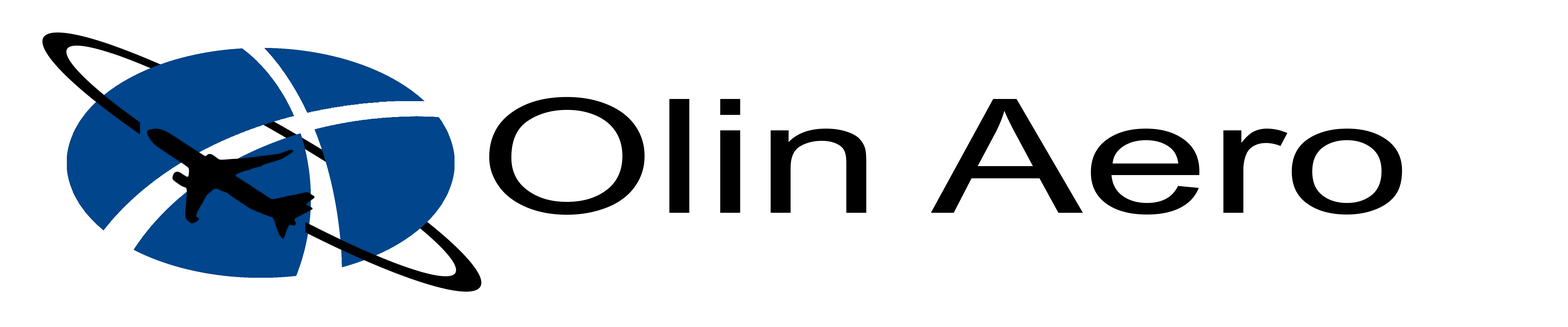
<style>
.page{position:relative;width:1568px;height:327px;background:#ffffff}
.page>*{position:absolute;margin:0}
.t1{font:158.8px "ArialMT";color:#000000;scale:1.43 1}
</style>
<div class="page">
<p class="t1" style="left:489px;top:97px;width:377px;height:118px">Olin</p>
<p class="t1" style="left:931px;top:99px;width:471px;height:115px">Aero</p>
</div>
